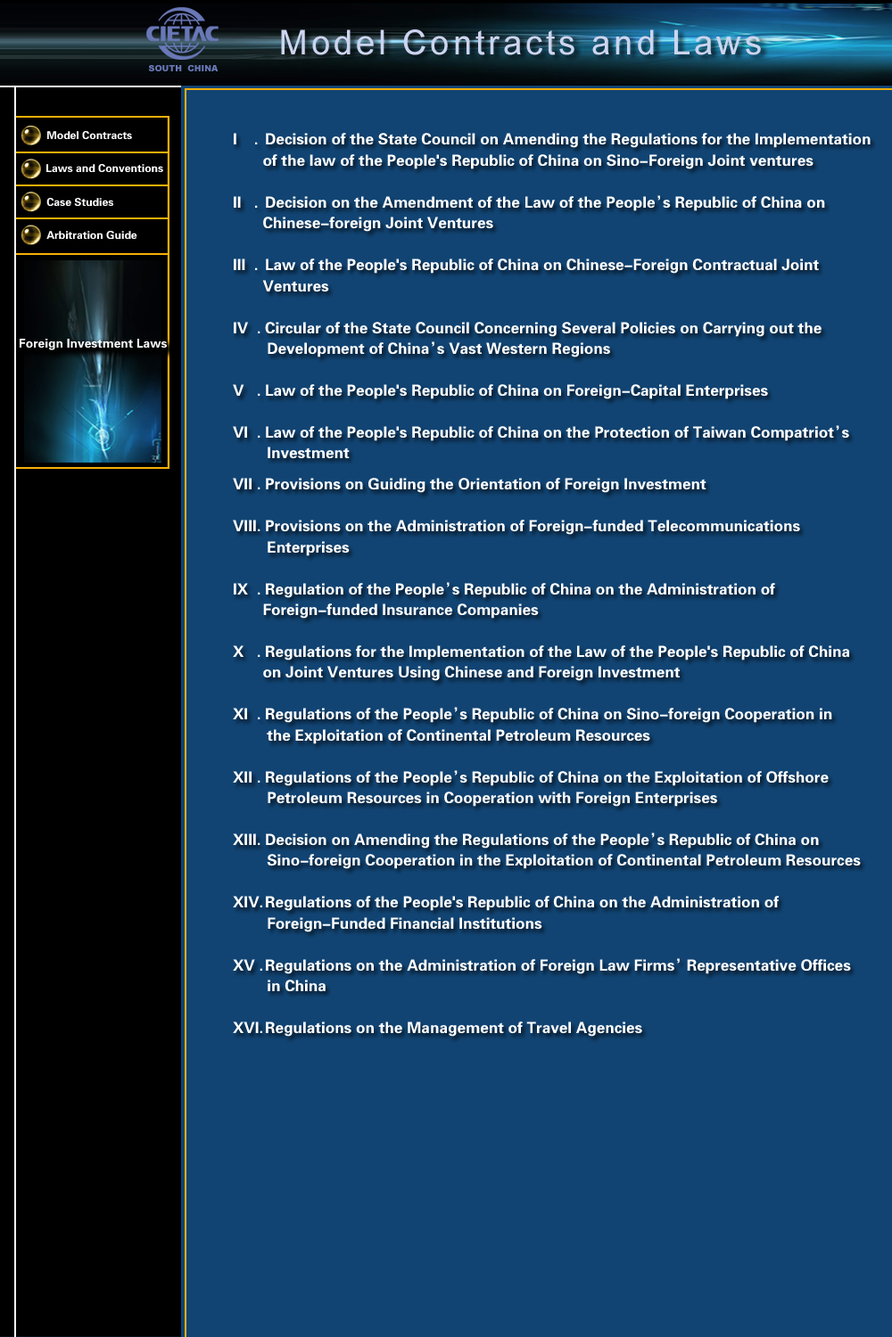
<style>
.page{position:relative;width:892px;height:1337px;background:#114473}
.page>*{position:absolute;margin:0}
.t1{font:10.9px "FZDHTJW--GB1-0";color:#ffffff}
.t2{font:15.3px/10.4px "FZDHTJW--GB1-0";color:#ffffff}
.t3{font:12.3px "FZDHTJW--GB1-0";color:#ffffff}
</style>
<div class="page">
<p class="t1" style="left:47px;top:131px;width:85px;height:8px">Model Contracts</p>
<p class="t2" style="left:233px;top:133px;width:637px;height:904px">I    . Decision of the State Council on Amending the Regulations for the Implementation<br><br>       of the law of the People's Republic of China on Sino-Foreign Joint ventures<br><br><br><br>II   . Decision on the Amendment of the Law of the People’s Republic of China on <br><br>       Chinese-foreign Joint Ventures<br><br><br><br>III  . Law of the People's Republic of China on Chinese-Foreign Contractual Joint <br><br>       Ventures<br><br><br><br>IV  . Circular of the State Council Concerning Several Policies on Carrying out the<br><br>        Development of China’s Vast Western Regions <br><br><br><br>V   . Law of the People's Republic of China on Foreign-Capital Enterprises<br><br><br><br>VI  . Law of the People's Republic of China on the Protection of Taiwan Compatriot’s <br><br>        Investment<br> <br><br>VII . Provisions on Guiding the Orientation of Foreign Investment<br><br><br><br>VIII. Provisions on the Administration of Foreign-funded Telecommunications <br><br>        Enterprises<br><br><br><br>IX  . Regulation of the People’s Republic of China on the Administration of<br><br>       Foreign-funded Insurance Companies<br><br><br><br>X   . Regulations for the Implementation of the Law of the People's Republic of China <br><br>       on Joint Ventures Using Chinese and Foreign Investment<br><br><br><br>XI  . Regulations of the People’s Republic of China on Sino-foreign Cooperation in <br><br>        the Exploitation of Continental Petroleum Resources<br><br><br><br>XII . Regulations of the People’s Republic of China on the Exploitation of Offshore<br><br>        Petroleum Resources in Cooperation with Foreign Enterprises<br><br><br><br>XIII. Decision on Amending the Regulations of the People’s Republic of China on <br><br>        Sino-foreign Cooperation in the Exploitation of Continental Petroleum Resources <br><br><br><br>XIV. Regulations of the People's Republic of China on the Administration of<br><br>        Foreign-Funded Financial Institutions<br><br><br><br>XV . Regulations on the Administration of Foreign Law Firms’ Representative Offices<br><br>        in China<br><br><br><br>XVI. Regulations on the Management of Travel Agencies</p>
<p class="t1" style="left:46px;top:164px;width:117px;height:8px">Laws and Conventions</p>
<p class="t1" style="left:46px;top:198px;width:67px;height:8px">Case Studies</p>
<p class="t1" style="left:46px;top:231px;width:91px;height:8px">Arbitration Guide</p>
<p class="t3" style="left:20px;top:339px;width:147px;height:11px">Foreign Investment Laws</p>
</div>
